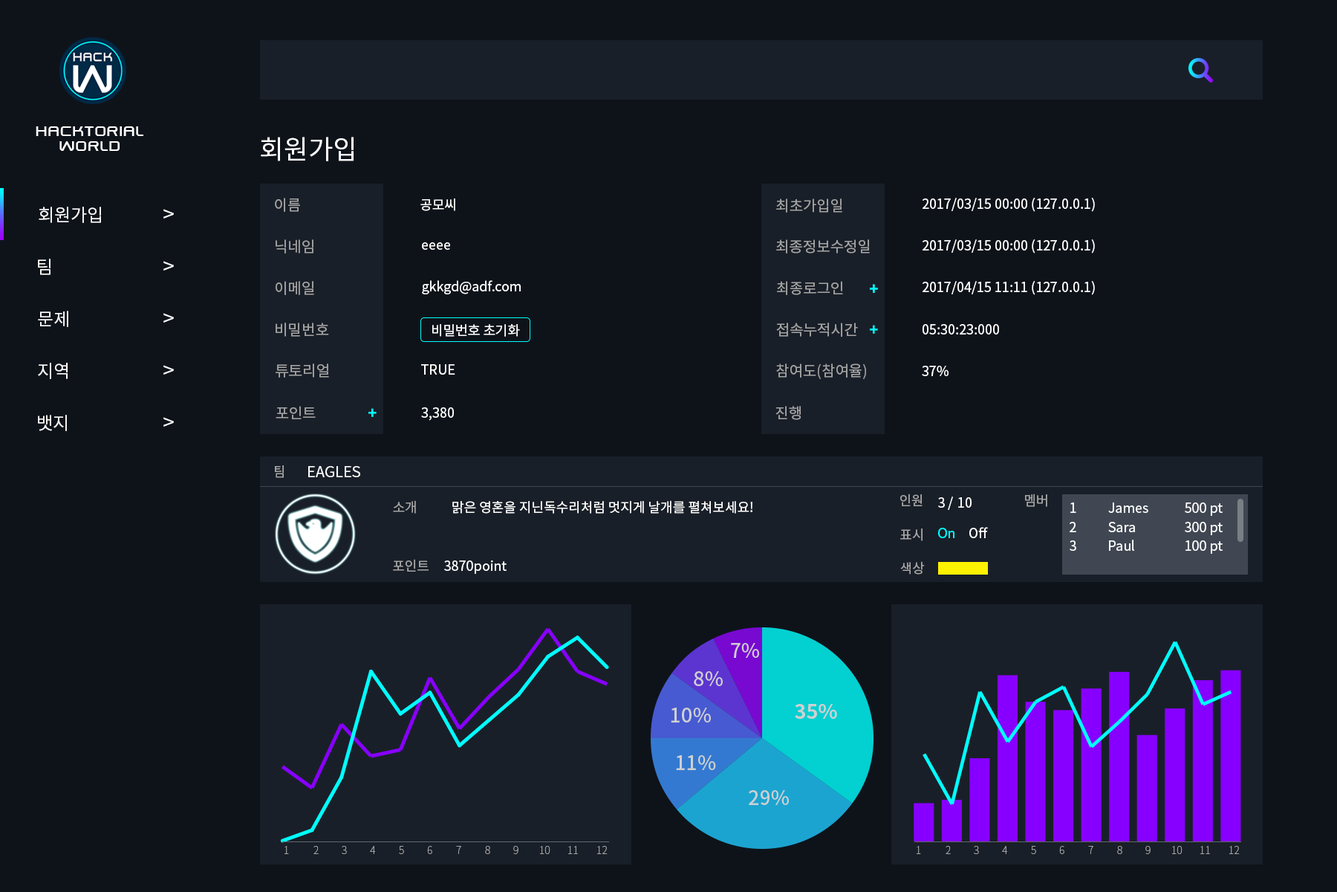
<style>
.page{position:relative;width:1337px;height:892px;background:#0e131a}
.page>*{position:absolute;margin:0}
.t1{font:17.8px/14.9px "SwiszRegular";color:#ffffff}
.t2{font:26.7px "NotoSansCJKkr-Regular";color:#ffffff}
.t3{font:14.9px "NotoSansCJKkr-Regular";color:#a3a3a3}
.t4{font:13.4px "NotoSansCJKkr-Regular";color:#ffffff}
.t5{font:17.8px "NotoSansCJKkr-Regular";color:#ffffff}
.t6{font:20.8px "NotoSansCJKkr-Regular";color:#ffffff}
.t7{font:14.9px "NotoSansCJKkr-Black";color:#00ffff}
.t8{font:13.4px "NotoSansCJKkr-Regular";color:#a6a6a6}
.t9{font:14.9px "NotoSansCJKkr-Regular";color:#ffffff}
.t10{font:13.4px "NotoSansCJKkr-Regular";color:#00ffff}
.t11{font:10.4px "NotoSansCJKkr-Thin";color:#a6a6a6}
</style>
<div class="page">
<p class="t1" style="left:36px;top:126px;width:107px;height:25px;text-align:center">hacktorial<br>world</p>
<p class="t2" style="left:261px;top:137px;width:93px;height:24px">회원가입</p>
<p class="t3" style="left:275px;top:198px;width:25px;height:14px">이름</p>
<p class="t4" style="left:923px;top:198px;width:172px;height:14px">2017/03/15 00:00 (127.0.0.1)</p>
<p class="t5" style="left:39px;top:207px;width:62px;height:16px">회원가입</p>
<p class="t6" style="left:163px;top:209px;width:11px;height:9px">&gt;</p>
<p class="t4" style="left:421px;top:198px;width:34px;height:13px">공모씨</p>
<p class="t3" style="left:776px;top:198px;width:67px;height:14px">최초가입일</p>
<p class="t3" style="left:276px;top:239px;width:38px;height:14px">닉네임</p>
<p class="t4" style="left:422px;top:242px;width:28px;height:8px">eeee</p>
<p class="t3" style="left:776px;top:239px;width:94px;height:14px">최종정보수정일</p>
<p class="t4" style="left:923px;top:239px;width:172px;height:14px">2017/03/15 00:00 (127.0.0.1)</p>
<p class="t5" style="left:38px;top:259px;width:13px;height:16px">팀</p>
<p class="t6" style="left:163px;top:261px;width:11px;height:9px">&gt;</p>
<p class="t3" style="left:276px;top:281px;width:38px;height:14px">이메일</p>
<p class="t4" style="left:422px;top:280px;width:99px;height:14px">gkkgd@adf.com</p>
<p class="t3" style="left:777px;top:281px;width:66px;height:14px">최종로그인</p>
<p class="t4" style="left:923px;top:281px;width:172px;height:14px">2017/04/15 11:11 (127.0.0.1)</p>
<p class="t7" style="left:870px;top:284px;width:8px;height:9px">+</p>
<p class="t7" style="left:870px;top:284px;width:8px;height:9px">+</p>
<p class="t5" style="left:38px;top:311px;width:30px;height:16px">문제</p>
<p class="t6" style="left:163px;top:313px;width:11px;height:9px">&gt;</p>
<p class="t3" style="left:276px;top:322px;width:53px;height:15px">비밀번호</p>
<p class="t4" style="left:432px;top:324px;width:88px;height:13px">비밀번호 초기화</p>
<p class="t3" style="left:776px;top:322px;width:82px;height:15px">접속누적시간</p>
<p class="t7" style="left:870px;top:325px;width:8px;height:9px">+</p>
<p class="t4" style="left:923px;top:324px;width:76px;height:10px">05:30:23:000</p>
<p class="t5" style="left:38px;top:363px;width:30px;height:16px">지역</p>
<p class="t6" style="left:163px;top:365px;width:11px;height:9px">&gt;</p>
<p class="t3" style="left:276px;top:363px;width:53px;height:14px">튜토리얼</p>
<p class="t4" style="left:421px;top:364px;width:34px;height:10px">TRUE</p>
<p class="t3" style="left:776px;top:363px;width:90px;height:16px">참여도(참여율)</p>
<p class="t4" style="left:922px;top:366px;width:27px;height:10px">37%</p>
<p class="t3" style="left:276px;top:406px;width:40px;height:13px">포인트</p>
<p class="t7" style="left:369px;top:408px;width:8px;height:9px">+</p>
<p class="t4" style="left:421px;top:407px;width:33px;height:14px">3,380</p>
<p class="t3" style="left:776px;top:406px;width:26px;height:14px">진행</p>
<p class="t5" style="left:38px;top:415px;width:29px;height:16px">뱃지</p>
<p class="t6" style="left:163px;top:417px;width:11px;height:9px">&gt;</p>
<p class="t8" style="left:275px;top:465px;width:9px;height:13px">팀</p>
<p class="t9" style="left:308px;top:466px;width:52px;height:11px">EAGLES</p>
<p class="t8" style="left:901px;top:493px;width:22px;height:13px">인원</p>
<p class="t4" style="left:938px;top:496px;width:15px;height:14px">3 /</p>
<p class="t4" style="left:958px;top:497px;width:14px;height:10px">10</p>
<p class="t8" style="left:1025px;top:493px;width:23px;height:14px">멤버</p>
<p class="t8" style="left:393px;top:500px;width:23px;height:13px">소개</p>
<p class="t4" style="left:452px;top:500px;width:301px;height:13px">맑은 영혼을 지닌독수리처럼 멋지게 날개를 펼쳐보세요!</p>
<p class="t4" style="left:1071px;top:502px;width:6px;height:11px">1</p>
<p class="t4" style="left:1109px;top:502px;width:40px;height:11px">James</p>
<p class="t4" style="left:1185px;top:502px;width:38px;height:14px">500 pt</p>
<p class="t4" style="left:1070px;top:522px;width:7px;height:10px">2</p>
<p class="t4" style="left:1109px;top:522px;width:26px;height:10px">Sara</p>
<p class="t4" style="left:1185px;top:522px;width:38px;height:13px">300 pt</p>
<p class="t8" style="left:901px;top:528px;width:22px;height:13px">표시</p>
<p class="t10" style="left:938px;top:528px;width:17px;height:10px">On</p>
<p class="t4" style="left:970px;top:527px;width:18px;height:11px">Off</p>
<p class="t4" style="left:1070px;top:540px;width:7px;height:11px">3</p>
<p class="t4" style="left:1109px;top:539px;width:26px;height:12px">Paul</p>
<p class="t4" style="left:1186px;top:540px;width:37px;height:14px">100 pt</p>
<p class="t8" style="left:393px;top:559px;width:36px;height:12px">포인트</p>
<p class="t4" style="left:444px;top:560px;width:63px;height:14px">3870point</p>
<p class="t8" style="left:901px;top:561px;width:24px;height:13px">색상</p>
<p class="t11" style="left:285px;top:846px;width:4px;height:8px">1</p>
<p class="t11" style="left:314px;top:846px;width:5px;height:8px">2</p>
<p class="t11" style="left:342px;top:846px;width:5px;height:8px">3</p>
<p class="t11" style="left:370px;top:846px;width:6px;height:8px">4</p>
<p class="t11" style="left:399px;top:846px;width:5px;height:8px">5</p>
<p class="t11" style="left:427px;top:846px;width:5px;height:8px">6</p>
<p class="t11" style="left:456px;top:846px;width:5px;height:8px">7</p>
<p class="t11" style="left:485px;top:846px;width:5px;height:8px">8</p>
<p class="t11" style="left:513px;top:846px;width:6px;height:8px">9</p>
<p class="t11" style="left:540px;top:846px;width:11px;height:8px">10</p>
<p class="t11" style="left:568px;top:846px;width:10px;height:8px">11</p>
<p class="t11" style="left:597px;top:846px;width:11px;height:8px">12</p>
<p class="t11" style="left:917px;top:846px;width:4px;height:8px">1</p>
<p class="t11" style="left:946px;top:846px;width:5px;height:8px">2</p>
<p class="t11" style="left:974px;top:846px;width:5px;height:8px">3</p>
<p class="t11" style="left:1002px;top:846px;width:6px;height:8px">4</p>
<p class="t11" style="left:1031px;top:846px;width:5px;height:8px">5</p>
<p class="t11" style="left:1060px;top:846px;width:5px;height:8px">6</p>
<p class="t11" style="left:1088px;top:846px;width:6px;height:8px">7</p>
<p class="t11" style="left:1117px;top:846px;width:6px;height:8px">8</p>
<p class="t11" style="left:1146px;top:846px;width:5px;height:8px">9</p>
<p class="t11" style="left:1172px;top:846px;width:11px;height:8px">10</p>
<p class="t11" style="left:1201px;top:846px;width:9px;height:8px">11</p>
<p class="t11" style="left:1230px;top:846px;width:10px;height:8px">12</p>
</div>
